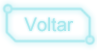
<style>
.page{position:relative;width:97px;height:52px}
.page>*{position:absolute;margin:0}
.t1{font:18.7px "ArialMT";color:#a8e8ee}
</style>
<div class="page">
<p class="t1" style="left:24px;top:17px;width:50px;height:15px">Voltar</p>
</div>
